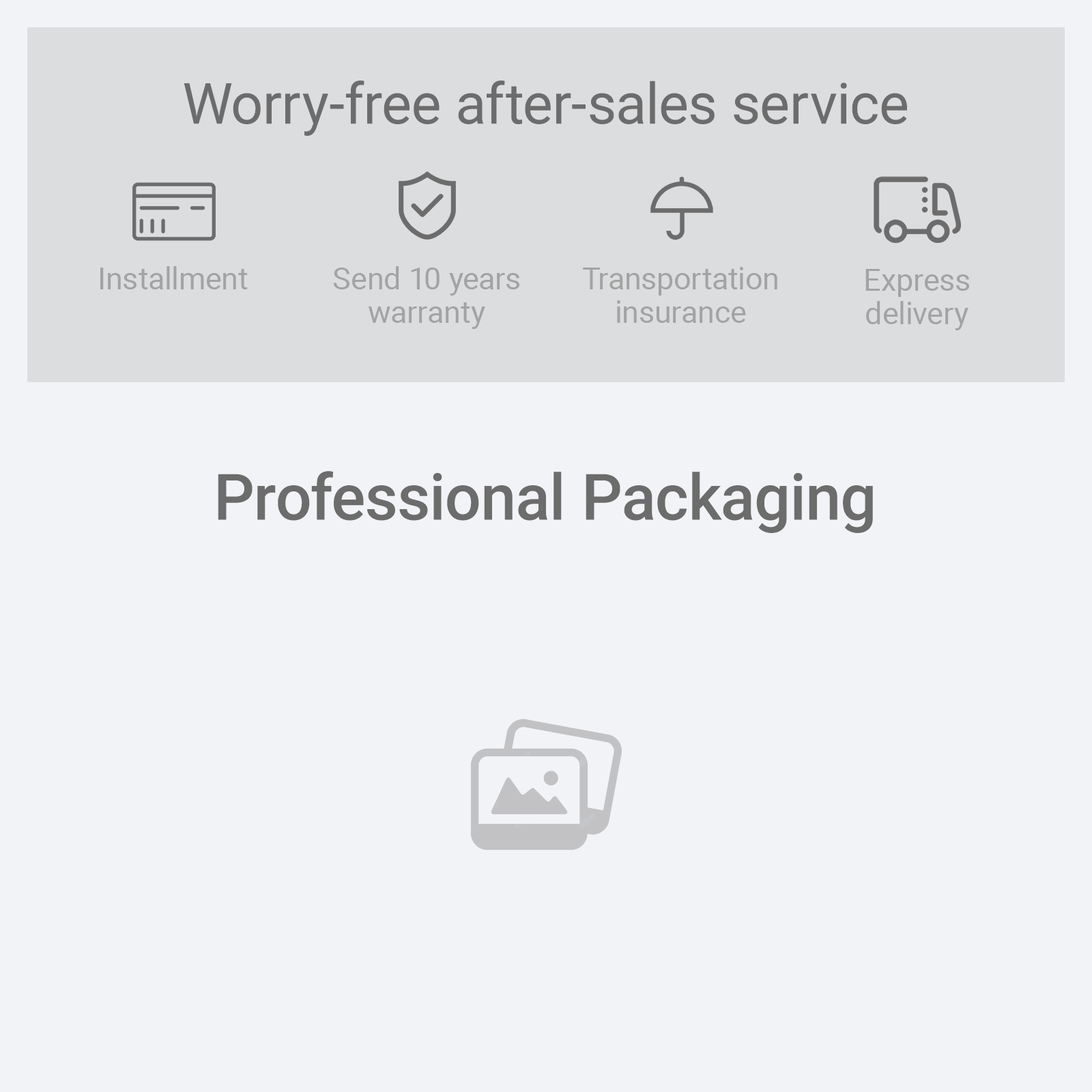
<style>
.page{position:relative;width:1092px;height:1092px;background:#f2f3f6}
.page>*{position:absolute;margin:0}
.t1{font:56.8px "Roboto-Regular";color:#6c6c6c}
.t2{font:30.6px "Roboto-Regular";color:#a3a3a3}
.t3{font:30.6px/33.5px "Roboto-Regular";color:#a3a3a3}
.t4{font:64.1px "Roboto-Medium";color:#6c6c6c}
</style>
<div class="page">
<p class="t1" style="left:184px;top:81px;width:723px;height:55px">Worry-free after-sales service</p>
<p class="t2" style="left:100px;top:266px;width:148px;height:23px">Installment</p>
<p class="t3" style="left:333px;top:266px;width:186px;height:63px;text-align:center">Send 10 years<br>warranty</p>
<p class="t3" style="left:583px;top:267px;width:194px;height:56px;text-align:center">Transportation<br>insurance</p>
<p class="t3" style="left:865px;top:269px;width:104px;height:61px;text-align:center">Express<br>delivery</p>
<p class="t4" style="left:218px;top:471px;width:655px;height:62px">Professional Packaging</p>
</div>
